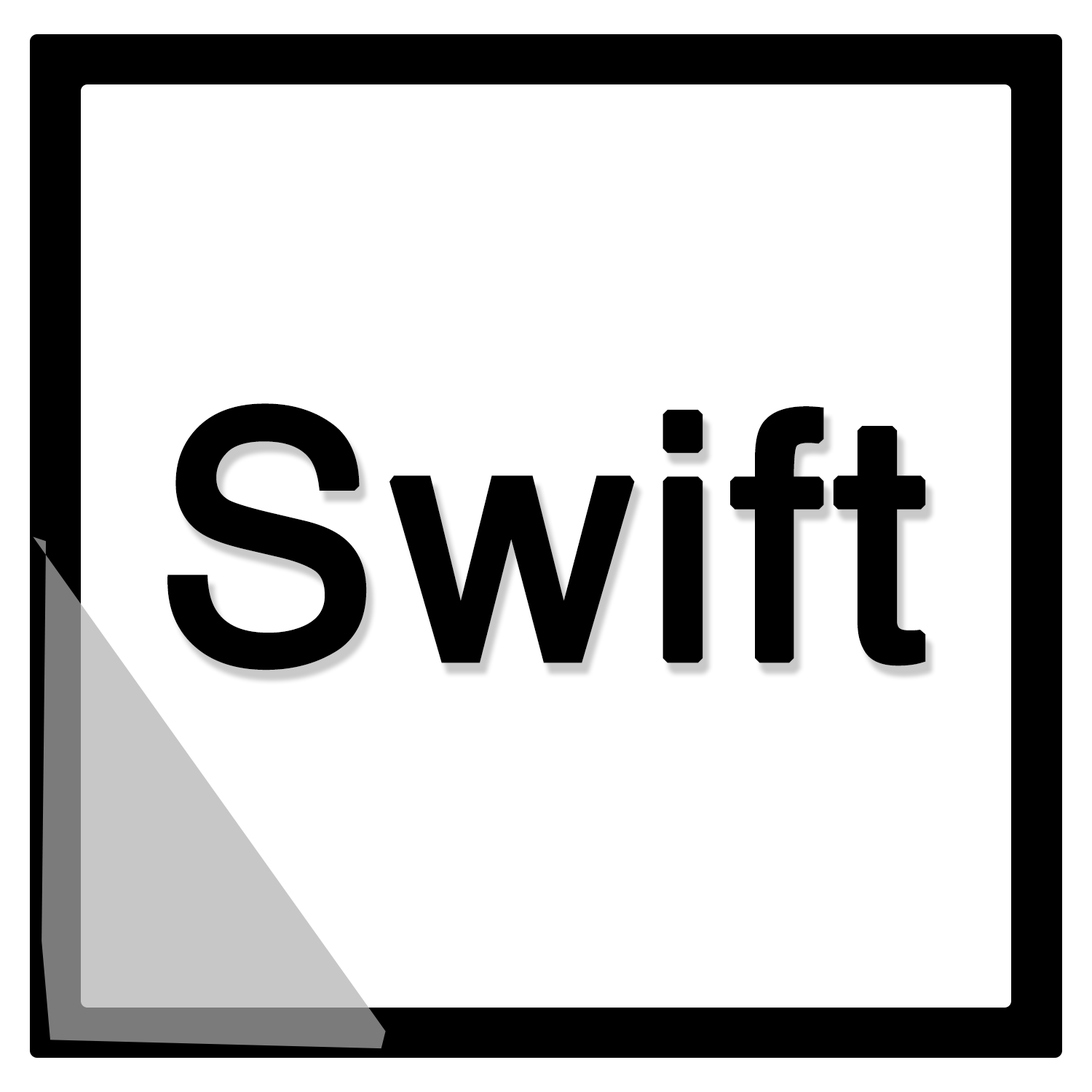
<style>
.page{position:relative;width:1092px;height:1092px;background:#ffffff}
.page>*{position:absolute;margin:0}
.t1{font:339.8px "Helvetica";color:#000000;font-weight:bold}
</style>
<div class="page">
<p class="t1" style="left:167px;top:403px;width:759px;height:267px">Swift</p>
</div>
